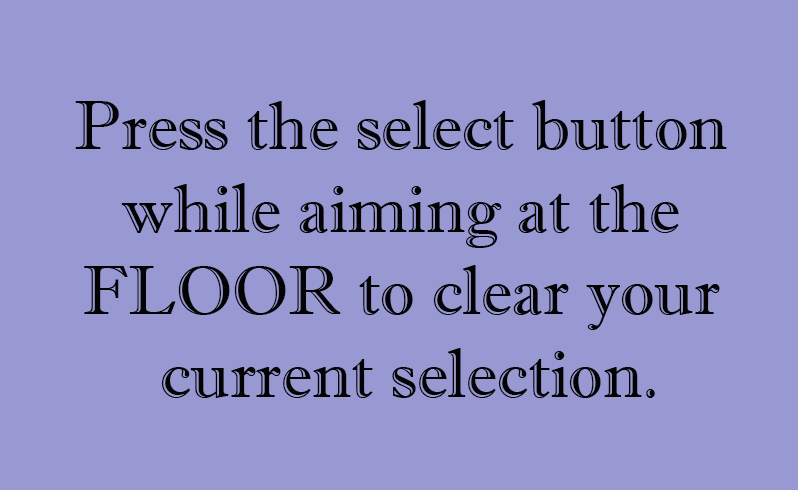
<style>
.page{position:relative;width:798px;height:490px;background:#9898d3}
.page>*{position:absolute;margin:0}
.t1{font:68.7px "ImprintMT-Shadow";color:#030303}
</style>
<div class="page">
<p class="t1" style="left:75px;top:100px;width:652px;height:298px;text-align:center">Press the select button <br>while aiming at the <br>FLOOR to clear your <br>current selection.</p>
</div>
